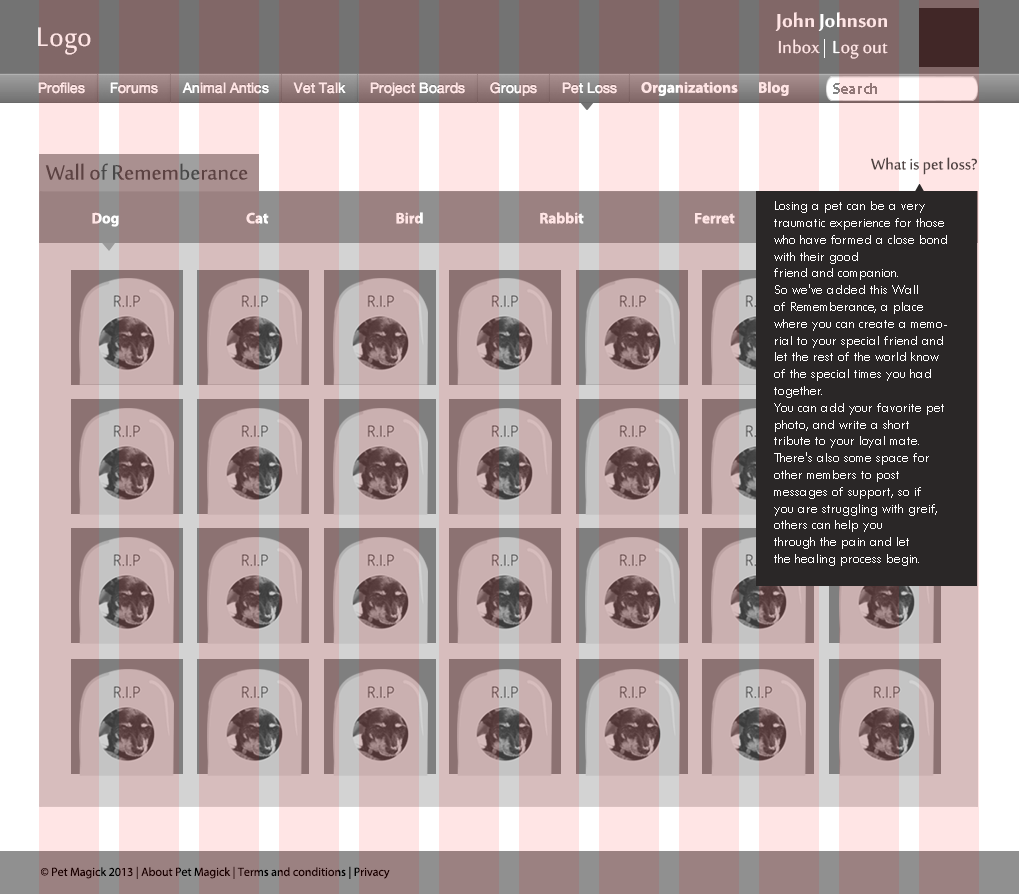
<style>
.page{position:relative;width:1020px;height:894px}
.page>*{position:absolute;margin:0}
.t1{font:25.9px "SakkalMajallaBold";color:#ffe5e5}
.t2{font:36.8px "SakkalMajalla";color:#ffe5e5}
.t3{font:24.1px "SakkalMajalla";color:#ffe5e5}
.t4{font:15.4px "MyriadPro-Bold";color:#ffe5e5}
.t5{font:15.4px "MyriadPro-Bold";color:#8b7d7d}
.t6{font:21px "SakkalMajalla";color:#504342}
.t7{font:28.4px "SakkalMajalla";color:#504342}
.t8{font:14px "TwCenMT-Regular";color:#ffffff}
.t9{font:15.2px "MyriadPro-Bold";color:#ffffff}
.t10{font:15.2px "MyriadPro-Bold"}
.t11{font:15.2px "MyriadPro-Bold";color:#ffe5e5}
.t12{font:12px "MyriadPro-Regular";color:#1a0000}
</style>
<div class="page">
<p class="t1" style="left:775px;top:12px;width:112px;height:19px">John Johnson</p>
<p class="t2" style="left:38px;top:27px;width:53px;height:28px">Logo</p>
<p class="t3" style="left:778px;top:39px;width:42px;height:15px">Inbox</p>
<p class="t3" style="left:833px;top:40px;width:55px;height:19px">Log out</p>
<p class="t4" style="left:641px;top:81px;width:97px;height:15px">Organizations</p>
<p class="t4" style="left:759px;top:81px;width:30px;height:15px">Blog</p>
<p class="t5" style="left:833px;top:83px;width:44px;height:11px">Search</p>
<p class="t6" style="left:871px;top:157px;width:106px;height:18px">What is pet loss?</p>
<p class="t7" style="left:45px;top:163px;width:203px;height:17px">Wall of Rememberance</p>
<p class="t8" style="left:774px;top:201px;width:173px;height:365px">Losing a pet can be a very traumatic experience for those who have formed a close bond with their good<br>friend and companion.<br>So we've added this Wall <br>of Rememberance, a place <br>where you can create a memorial to your special friend and let the rest of the world know of the special times you had together. <br>You can add your favorite pet photo, and write a short tribute to your loyal mate.<br>There's also some space for other members to post<br>messages of support, so if <br>you are struggling with greif, others can help you <br>through the pain and let<br>the healing process begin.</p>
<p class="t9" style="left:92px;top:212px;width:27px;height:15px">Dog</p>
<p class="t10" style="left:246px;top:212px;width:23px;height:12px">Cat</p>
<p class="t11" style="left:396px;top:212px;width:27px;height:12px">Bird</p>
<p class="t11" style="left:540px;top:212px;width:44px;height:12px">Rabbit</p>
<p class="t11" style="left:695px;top:213px;width:40px;height:11px">Ferret</p>
<p class="t12" style="left:41px;top:866px;width:349px;height:13px">© Pet Magick 2013 | About Pet Magick | Terms and conditions | Privacy</p>
</div>
